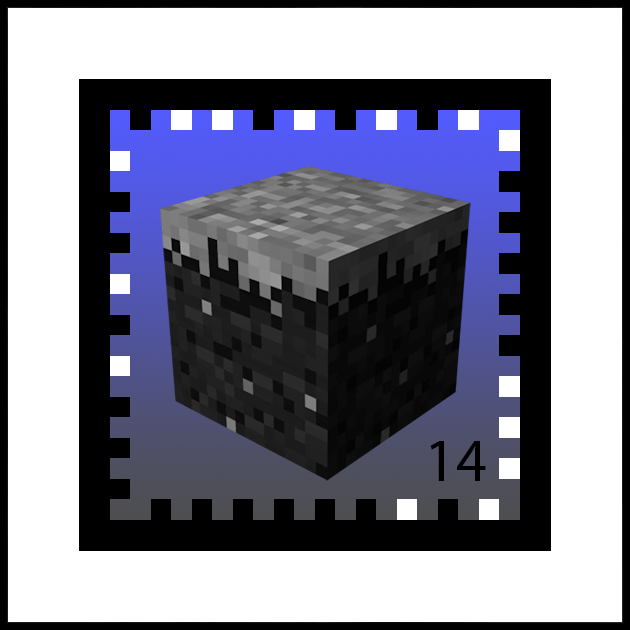
<style>
.page{position:relative;width:630px;height:630px;background:#ffffff}
.page>*{position:absolute;margin:0}
.t1{font:61.1px "MyriadPro-Regular";color:#000000;font-variant:small-caps}
</style>
<div class="page">
<p class="t1" style="left:430px;top:441px;width:56px;height:40px">14</p>
</div>
